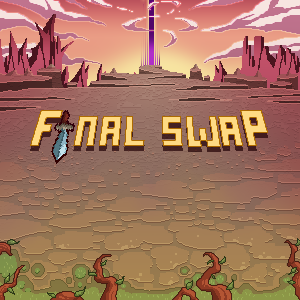
<style>
.page{position:relative;width:300px;height:300px}
.page>*{position:absolute;margin:0}
.t1{font:60px "wendy";color:#ffdb84}
.t2{font:72px "wendy";color:#ffdb84}
</style>
<div class="page">
<p class="t1" style="left:30px;top:110px;width:238px;height:37px"><span class="t2">F</span> nAL SWA<span class="t2">P</span></p>
</div>
